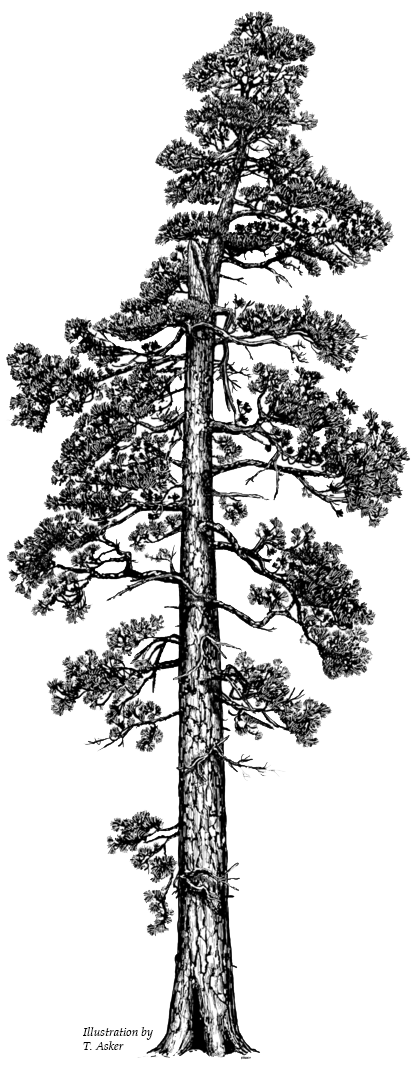
<style>
.page{position:relative;width:415px;height:1080px;background:#ffffff}
.page>*{position:absolute;margin:0}
.t1{font:12px "Palatino-Italic";color:#000000}
</style>
<div class="page">
<p class="t1" style="left:83px;top:1027px;width:70px;height:23px">Illustration by<br>T. Asker</p>
</div>
